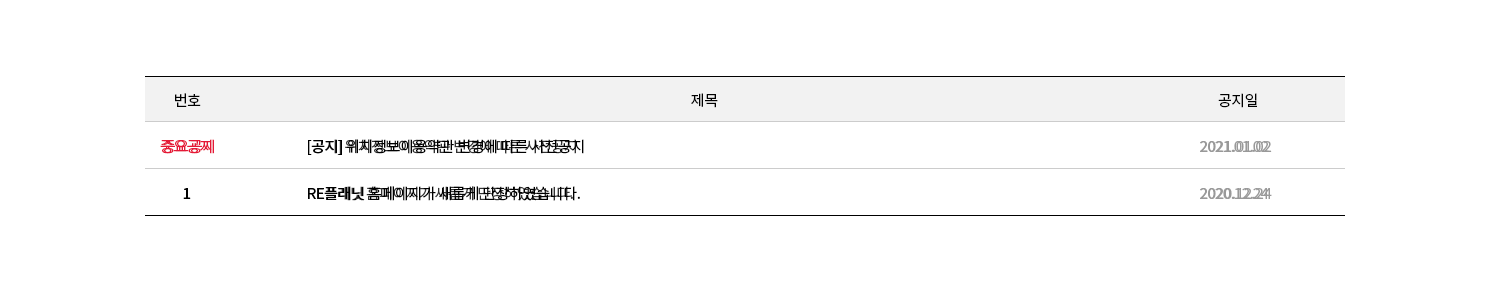
<style>
.page{position:relative;width:1500px;height:300px;background:#ffffff}
.page>*{position:absolute;margin:0}
.t1{font:15px "NotoSansKR-Regular";letter-spacing:-0.02em;color:#000000;font-variant:small-caps}
.t2{font:15px "NotoSansKR-Regular";letter-spacing:-0.02em;color:#e51837;font-variant:small-caps}
.t3{font:15px "NotoSansKR-Regular";letter-spacing:-0.02em;color:#000000}
.t4{font:15px "NotoSansKR-Regular";letter-spacing:-0.02em;color:#999999}
</style>
<div class="page">
<p class="t1" style="left:175px;top:93px;width:26px;height:14px">번호</p>
<p class="t1" style="left:691px;top:93px;width:27px;height:15px">제목</p>
<p class="t1" style="left:1218px;top:93px;width:39px;height:15px">공지일</p>
<p class="t2" style="left:162px;top:139px;width:52px;height:15px">중요공지</p>
<p class="t3" style="left:308px;top:139px;width:276px;height:16px">[공지] 위치정보이용약관 변경에 따른 사전공지</p>
<p class="t4" style="left:1200px;top:141px;width:72px;height:11px">2021.01.02</p>
<p class="t1" style="left:184px;top:188px;width:7px;height:11px">1</p>
<p class="t3" style="left:308px;top:186px;width:272px;height:15px">RE플래닛 홈페이지가 새롭게 단장하였습니다.</p>
<p class="t4" style="left:1200px;top:188px;width:72px;height:11px">2020.12.24</p>
</div>
